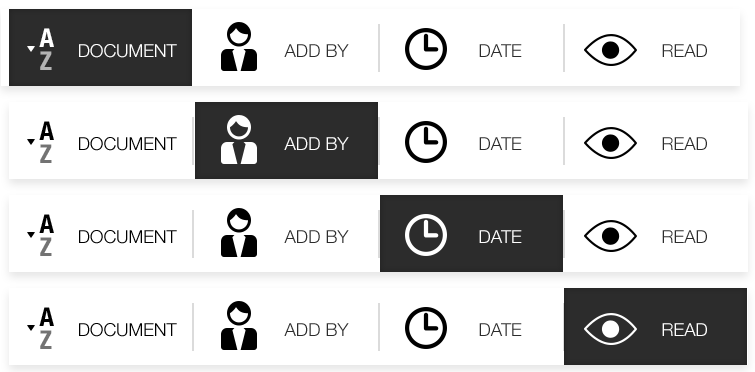
<style>
.page{position:relative;width:755px;height:372px;background:#ffffff}
.page>*{position:absolute;margin:0}
.t1{font:26px "HelveticaNeue-CondensedBold";color:#ffffff;text-transform:uppercase}
.t2{font:26px "HelveticaNeue-CondensedBold";color:#b4b4b4;text-transform:uppercase}
.t3{font:18px "HelveticaNeue-Light";color:#ffffff;text-transform:uppercase}
.t4{font:18px "HelveticaNeue-Light";color:#2c2c2c;text-transform:uppercase}
.t5{font:26px "HelveticaNeue-CondensedBold";color:#000000;text-transform:uppercase}
.t6{font:18px "HelveticaNeue-Light";color:#000000;text-transform:uppercase}
.t7{font:26px "HelveticaNeue-CondensedBold";color:#737373;text-transform:uppercase}
</style>
<div class="page">
<p class="t1" style="left:39px;top:28px;width:15px;height:19px">A</p>
<p class="t2" style="left:40px;top:51px;width:12px;height:19px">Z</p>
<p class="t3" style="left:79px;top:44px;width:98px;height:14px">DOCUMENT</p>
<p class="t4" style="left:284px;top:44px;width:65px;height:13px">ADD BY</p>
<p class="t4" style="left:479px;top:44px;width:43px;height:13px">DATE</p>
<p class="t4" style="left:662px;top:44px;width:45px;height:13px">READ</p>
<p class="t5" style="left:39px;top:121px;width:15px;height:19px">A</p>
<p class="t6" style="left:79px;top:137px;width:98px;height:14px">DOCUMENT</p>
<p class="t3" style="left:284px;top:137px;width:65px;height:13px">ADD BY</p>
<p class="t4" style="left:479px;top:137px;width:43px;height:13px">DATE</p>
<p class="t4" style="left:662px;top:137px;width:45px;height:13px">READ</p>
<p class="t7" style="left:40px;top:144px;width:12px;height:19px">Z</p>
<p class="t5" style="left:39px;top:214px;width:15px;height:19px">A</p>
<p class="t6" style="left:79px;top:230px;width:98px;height:14px">DOCUMENT</p>
<p class="t4" style="left:284px;top:230px;width:65px;height:13px">ADD BY</p>
<p class="t3" style="left:479px;top:230px;width:43px;height:13px">DATE</p>
<p class="t4" style="left:662px;top:230px;width:45px;height:13px">READ</p>
<p class="t7" style="left:40px;top:237px;width:12px;height:19px">Z</p>
<p class="t5" style="left:39px;top:307px;width:15px;height:19px">A</p>
<p class="t6" style="left:79px;top:323px;width:98px;height:14px">DOCUMENT</p>
<p class="t4" style="left:284px;top:323px;width:65px;height:13px">ADD BY</p>
<p class="t4" style="left:479px;top:323px;width:43px;height:13px">DATE</p>
<p class="t3" style="left:662px;top:323px;width:45px;height:13px">READ</p>
<p class="t7" style="left:40px;top:330px;width:12px;height:19px">Z</p>
</div>
